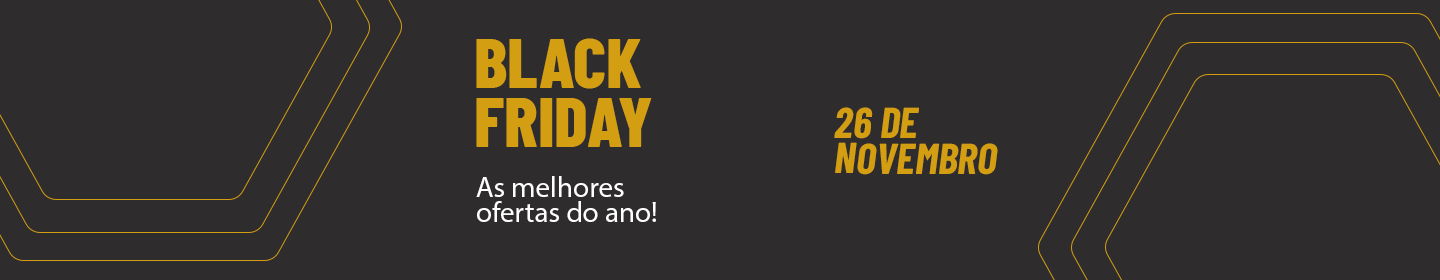
<style>
.page{position:relative;width:1440px;height:280px;background:#2e2c2c}
.page>*{position:absolute;margin:0}
.t1{font:70.3px/58.3px "BarlowCondensed-ExtraBold";color:#d49e13}
.t2{font:43.3px/35.9px "BarlowCondensed-BoldItalic";color:#d49e13}
.t3{font:29.2px/25px "MyriadPro-Regular";color:#ffffff}
</style>
<div class="page">
<p class="t1" style="left:476px;top:38px;width:176px;height:109px">BLACK<br>FRIDAY</p>
<p class="t2" style="left:834px;top:107px;width:164px;height:68px">26 DE<br>NOVEMBRO</p>
<p class="t3" style="left:476px;top:176px;width:180px;height:46px">As melhores <br>ofertas do ano!</p>
</div>
